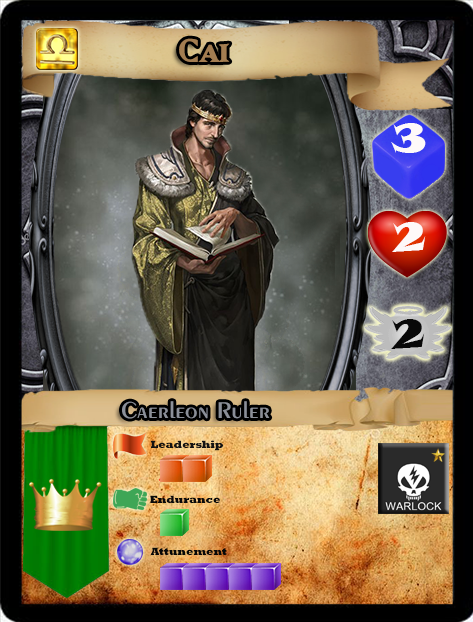
<style>
.page{position:relative;width:473px;height:622px}
.page>*{position:absolute;margin:0}
.t1{font:40px "MatrixBoldSmallCaps";color:#a37d51;scale:1.06 1}
.t2{font:40px "SnapITC-Regular";color:#fef9f9;scale:1.05 1}
.t3{font:40px "SnapITC-Regular";color:#090909;scale:1.05 1}
.t4{font:24px "Exotic350BT-DemiBold";color:#8b8f98;scale:1.06 1}
.t5{font:10.7px "Rockwell-ExtraBold";color:#131212}
.t6{font:10.7px "Rockwell-ExtraBold";color:#090909}
.t7{font:10.7px "Rockwell-ExtraBold";color:#080808}
</style>
<div class="page">
<p class="t1" style="left:179px;top:38px;width:51px;height:24px">Cai</p>
<p class="t2" style="left:391px;top:123px;width:35px;height:30px">3</p>
<p class="t2" style="left:392px;top:222px;width:34px;height:30px">2</p>
<p class="t3" style="left:391px;top:319px;width:34px;height:30px">2</p>
<p class="t4" style="left:122px;top:401px;width:148px;height:18px">Caerleon Ruler</p>
<p class="t5" style="left:151px;top:440px;width:72px;height:11px">Leadership</p>
<p class="t6" style="left:150px;top:495px;width:70px;height:8px">Endurance</p>
<p class="t7" style="left:151px;top:547px;width:76px;height:8px">Attunement</p>
</div>
